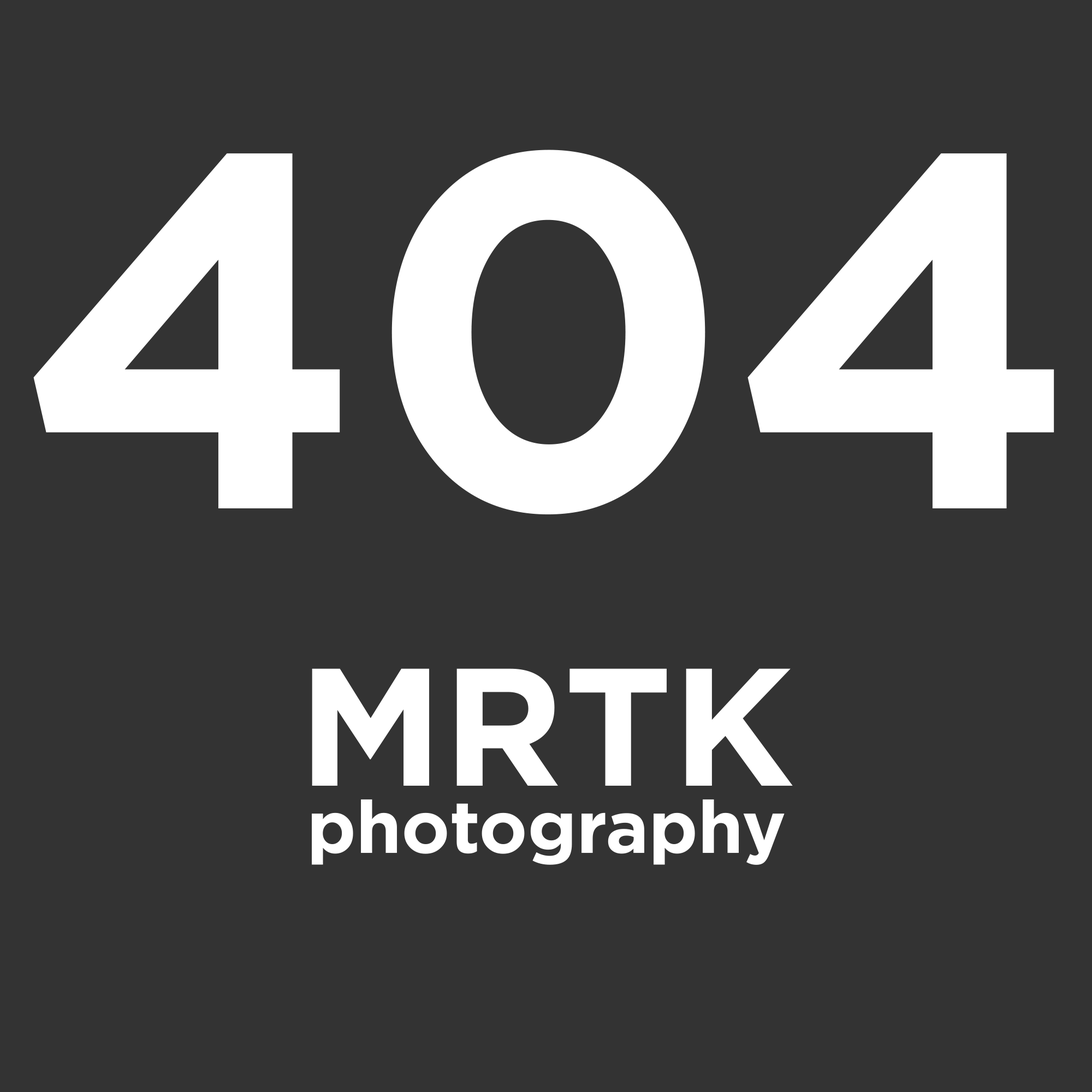
<style>
.page{position:relative;width:1092px;height:1092px;background:#333333}
.page>*{position:absolute;margin:0}
.t1{font:503.2px "GothamPro-Bold";color:#ffffff}
.t2{font:167px "GothamPro-Bold";color:#ffffff}
.t3{font:72.9px "GothamPro-Bold";color:#ffffff}
</style>
<div class="page">
<p class="t1" style="left:33px;top:150px;width:1021px;height:365px">404</p>
<p class="t2" style="left:312px;top:668px;width:481px;height:118px">MRTK</p>
<p class="t3" style="left:312px;top:799px;width:473px;height:66px">photography</p>
</div>
